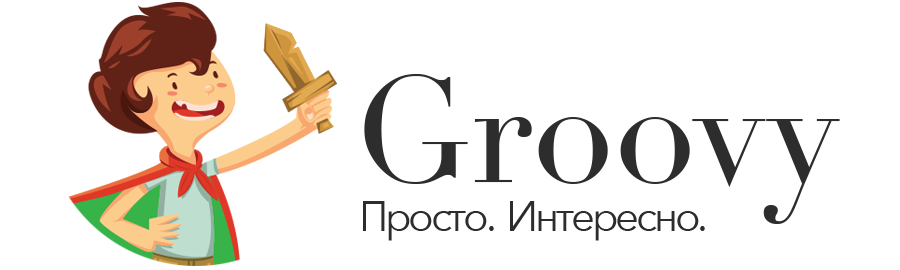
<style>
.page{position:relative;width:900px;height:270px;background:#ffffff}
.page>*{position:absolute;margin:0}
.t1{font:148.3px "Didot";color:#2d2d2d}
.t2{font:42.3px "AvenirNext-Regular";letter-spacing:-0.08em;color:#2d2d2d}
</style>
<div class="page">
<p class="t1" style="left:364px;top:74px;width:476px;height:150px">Groovy</p>
<p class="t2" style="left:363px;top:201px;width:342px;height:40px">Просто.  Интересно.</p>
</div>
